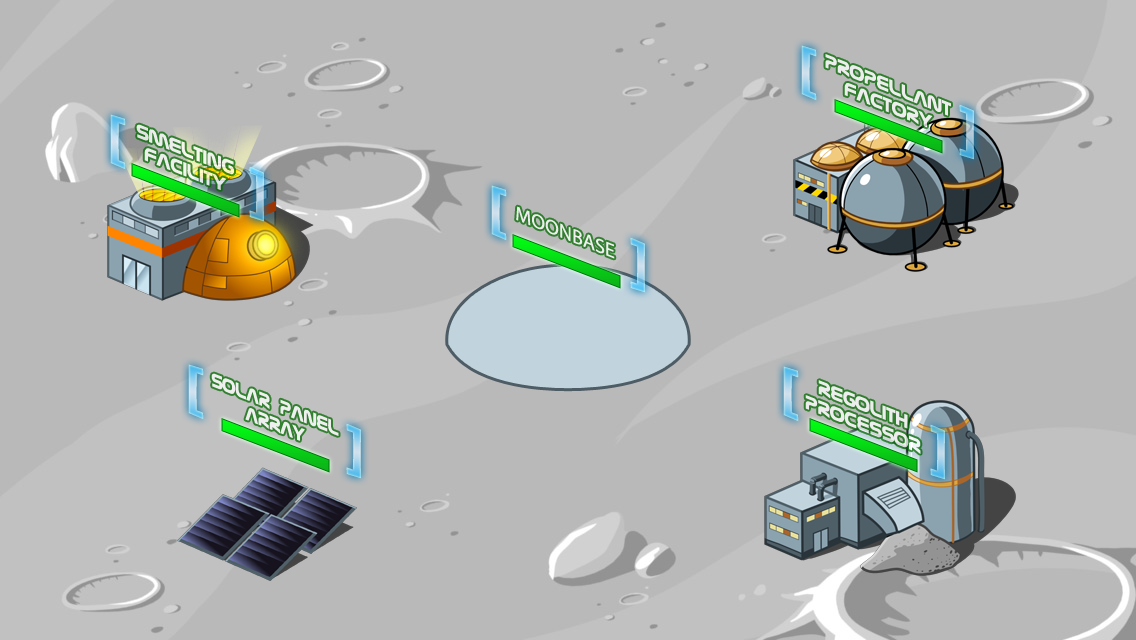
<style>
.page{position:relative;width:1136px;height:640px;background:#b9b9b9}
.page>*{position:absolute;margin:0}
.t1{font:56.6px "Lithograph-Bold";text-transform:uppercase;scale:0.91 1}
.t2{font:20px/20px "Nasalization";color:#ffffff;text-transform:uppercase;scale:1.07 1}
.t3{font:20px "MyriadPro-Regular";color:#ffffff;text-transform:uppercase;scale:1.07 1}
.t4{font:20px/20px "Nasalization";color:#ffffff;text-transform:uppercase;scale:0.97 1}
</style>
<div class="page">
<p class="t1" style="left:801px;top:45px;width:16px;height:56px;rotate:21deg">[</p>
<p class="t2" style="left:825px;top:54px;width:126px;height:74px;text-align:center;rotate:21deg;opacity:0.75">Propellant<br>Factory</p>
<p class="t1" style="left:959px;top:104px;width:15px;height:56px;rotate:21deg">]</p>
<p class="t1" style="left:110px;top:114px;width:16px;height:56px;rotate:21deg">[</p>
<p class="t2" style="left:136px;top:124px;width:98px;height:66px;text-align:center;rotate:21deg;opacity:0.75">smelting<br>facility</p>
<p class="t1" style="left:249px;top:166px;width:15px;height:56px;rotate:21deg">]</p>
<p class="t1" style="left:491px;top:185px;width:16px;height:56px;rotate:21deg">[</p>
<p class="t3" style="left:516px;top:206px;width:99px;height:53px;rotate:21deg;opacity:0.75">MoonBase</p>
<p class="t1" style="left:630px;top:237px;width:15px;height:56px;rotate:21deg">]</p>
<p class="t1" style="left:188px;top:364px;width:16px;height:56px;rotate:21deg">[</p>
<p class="t1" style="left:783px;top:366px;width:16px;height:56px;rotate:21deg">[</p>
<p class="t4" style="left:211px;top:373px;width:128px;height:68px;text-align:center;rotate:21deg;opacity:0.75">Solar panel<br>array</p>
<p class="t2" style="left:805px;top:380px;width:116px;height:74px;text-align:center;rotate:21deg;opacity:0.75">regolith<br>processor</p>
<p class="t1" style="left:346px;top:423px;width:15px;height:56px;rotate:21deg">]</p>
<p class="t1" style="left:930px;top:424px;width:15px;height:56px;rotate:21deg">]</p>
</div>
